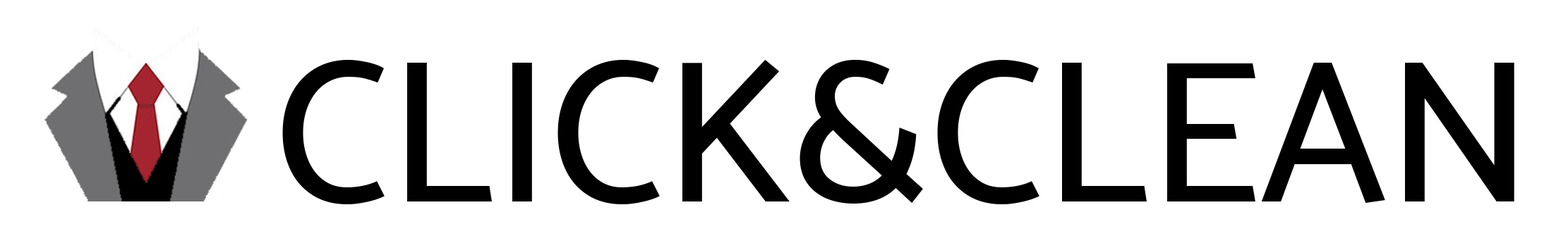
<style>
.page{position:relative;width:1568px;height:243px;background:#ffffff}
.page>*{position:absolute;margin:0}
.t1{font:204.2px "MoskMedium500";color:#000000}
</style>
<div class="page">
<p class="t1" style="left:282px;top:60px;width:1232px;height:145px">CLICK&amp;CLEAN</p>
</div>
